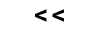
<style>
.page{position:relative;width:100px;height:30px;background:#ffffff}
.page>*{position:absolute;margin:0}
.t1{font:24px "SegoeUIBlack-Italic";color:#000000}
</style>
<div class="page">
<p class="t1" style="left:35px;top:9px;width:29px;height:13px">&lt;&lt;</p>
</div>
